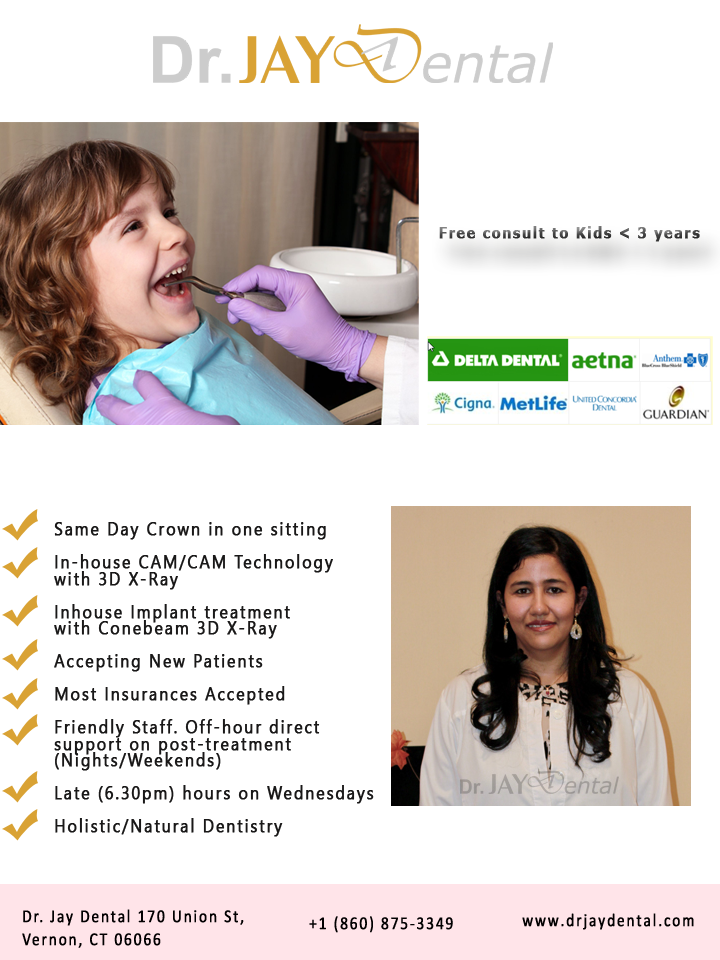
<style>
.page{position:relative;width:720px;height:960px;background:#ffffff}
.page>*{position:absolute;margin:0}
.t1{font:25.2px "Verdana-Bold";letter-spacing:0.1em;font-weight:bold;scale:0.87 1}
.t2{font:31.5px/16.5px "SegoeUI";letter-spacing:0.1em;color:#191818;font-weight:bold;scale:0.87 1}
.t3{font:31.5px/22.5px "Calibri";letter-spacing:0.1em;color:#020001;font-weight:bold;scale:0.83 1}
.t4{font:31.5px "Calibri";letter-spacing:0.1em;color:#020001;font-weight:bold;scale:0.83 1}
</style>
<div class="page">
<p class="t1" style="left:439px;top:226px;width:261px;height:16px">Free consult to Kids &lt; 3 years</p>
<p class="t2" style="left:54px;top:522px;width:320px;height:315px;text-align:justify">Same Day Crown in one sitting<br><br>In-house CAM/CAM Technology <br>with 3D X-Ray<br><br>Inhouse Implant treatment <br>with Conebeam 3D X-Ray<br><br>Accepting New Patients  <br><br>Most Insurances Accepted  <br><br>Friendly Staff. Off-hour direct <br>support on post-treatment <br>(Nights/Weekends)<br><br>Late (6.30pm) hours on Wednesdays<br><br>Holistic/Natural Dentistry</p>
<p class="t3" style="left:22px;top:909px;width:222px;height:39px">Dr. Jay Dental 170 Union St,<br>Vernon, CT 06066</p>
<p class="t4" style="left:309px;top:916px;width:144px;height:17px">+1 (860) 875-3349</p>
<p class="t4" style="left:522px;top:913px;width:172px;height:17px">www.drjaydental.com</p>
</div>
